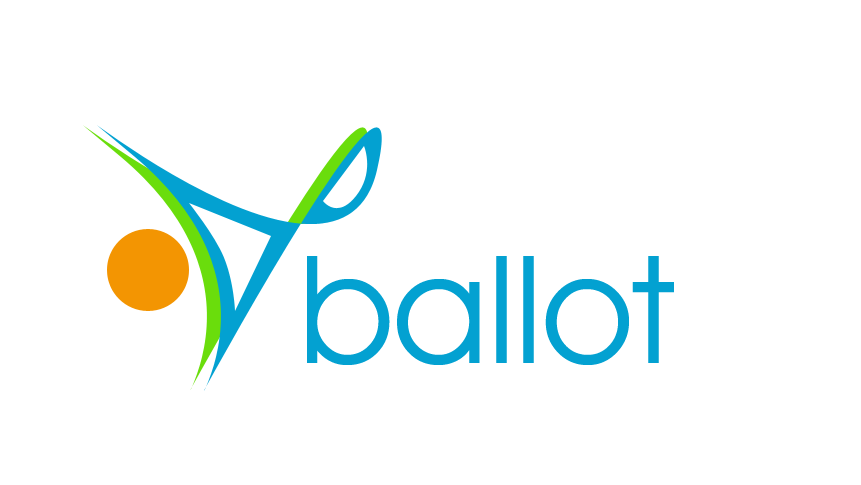
<style>
.page{position:relative;width:861px;height:485px;background:#ffffff}
.page>*{position:absolute;margin:0}
.t1{font:150px "AvantGardeITCbyBT-Book";color:#03a1d1}
</style>
<div class="page">
<p class="t1" style="left:307px;top:256px;width:367px;height:109px">ballot</p>
</div>
